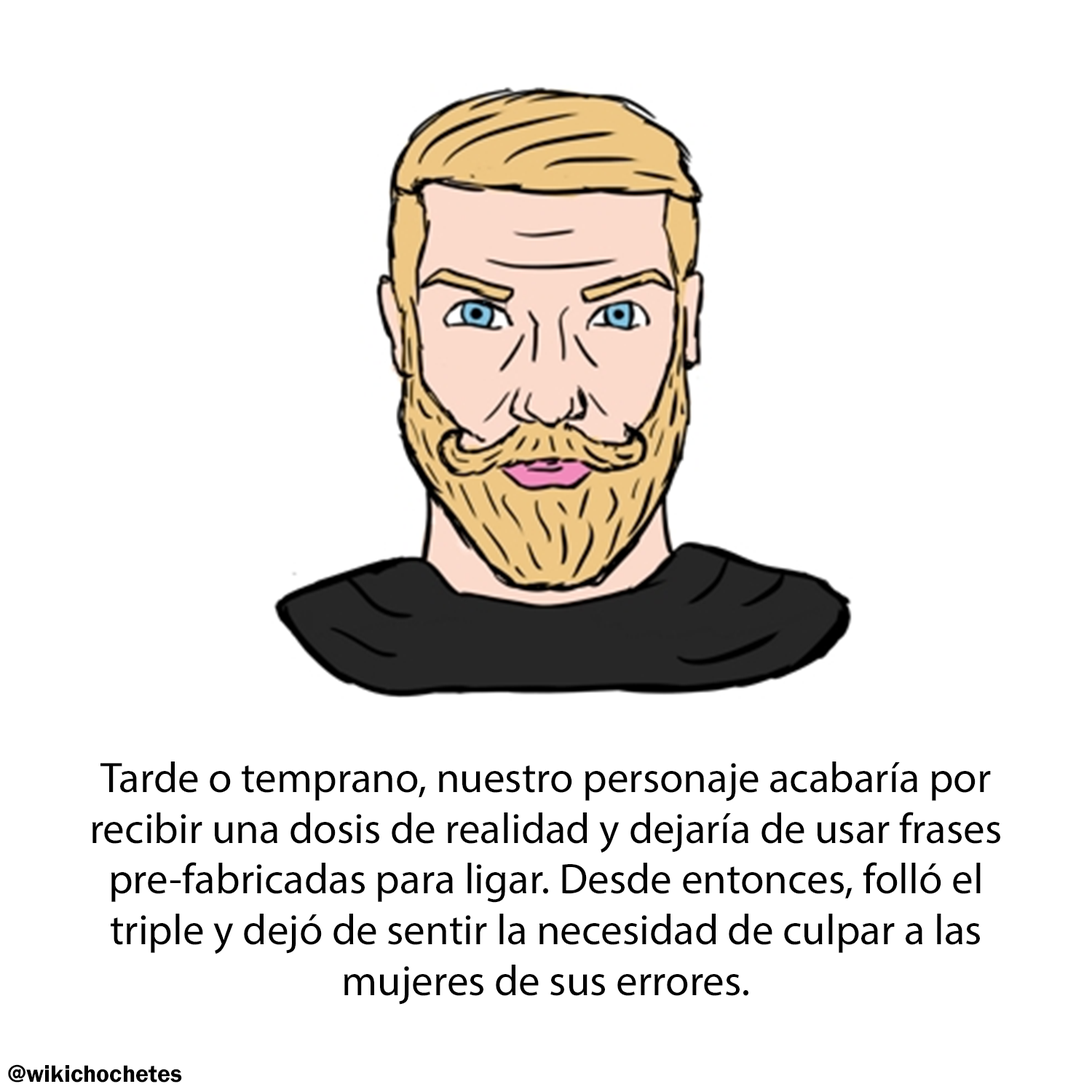
<style>
.page{position:relative;width:1092px;height:1092px;background:#ffffff}
.page>*{position:absolute;margin:0}
.t1{font:43px "MyriadPro-Regular";color:#000000}
.t2{font:24.5px "FranklinGothic-Demi";color:#000000}
</style>
<div class="page">
<p class="t1" style="left:92px;top:761px;width:908px;height:244px;text-align:center">Tarde o temprano, nuestro personaje acabaría por<br>recibir una dosis de realidad y dejaría de usar frases<br>pre-fabricadas para ligar. Desde entonces, folló el<br>triple y dejó de sentir la necesidad de culpar a las<br>mujeres de sus errores.</p>
<p class="t2" style="left:8px;top:1064px;width:174px;height:19px">@wikichochetes</p>
</div>
